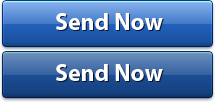
<style>
.page{position:relative;width:215px;height:102px}
.page>*{position:absolute;margin:0}
.t1{font:24px "MyriadPro-Bold";color:#ffffff}
</style>
<div class="page">
<p class="t1" style="left:56px;top:13px;width:107px;height:17px">Send Now</p>
<p class="t1" style="left:56px;top:64px;width:107px;height:17px">Send Now</p>
</div>
